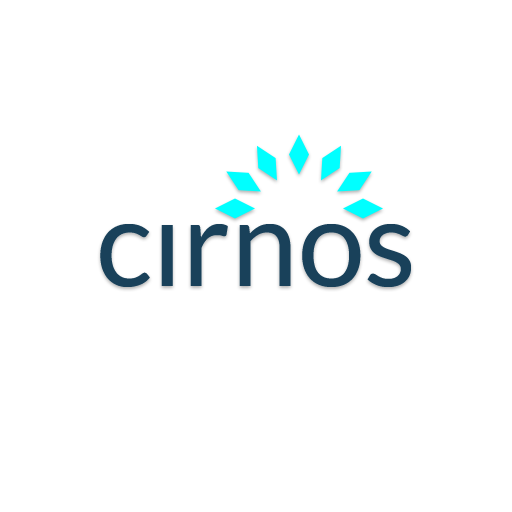
<style>
.page{position:relative;width:512px;height:512px;background:#ffffff}
.page>*{position:absolute;margin:0}
.t1{font:120px "Lato-Regular";color:#19415a}
</style>
<div class="page">
<p class="t1" style="left:100px;top:198px;width:311px;height:89px">cirnos</p>
</div>
